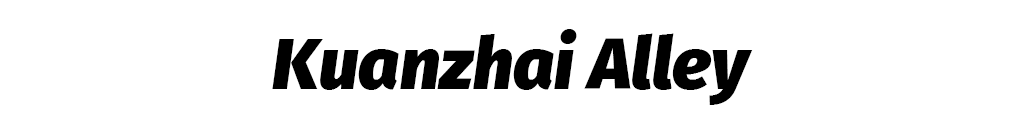
<style>
.page{position:relative;width:1024px;height:128px;background:#ffffff}
.page>*{position:absolute;margin:0}
.t1{font:71.8px "FiraSans-BlackItalic";color:#000000}
</style>
<div class="page">
<p class="t1" style="left:272px;top:29px;width:481px;height:76px">Kuanzhai Alley</p>
</div>
